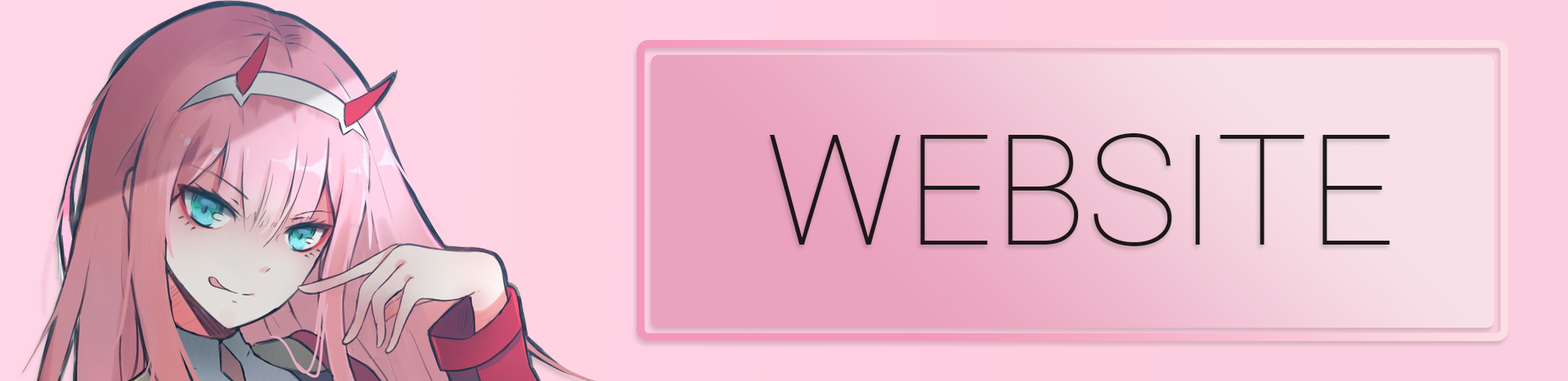
<style>
.page{position:relative;width:1568px;height:381px}
.page>*{position:absolute;margin:0}
.t1{font:154.4px "Roboto-Thin";color:#1c1719}
</style>
<div class="page">
<p class="t1" style="left:769px;top:133px;width:621px;height:113px">WEBSITE</p>
</div>
